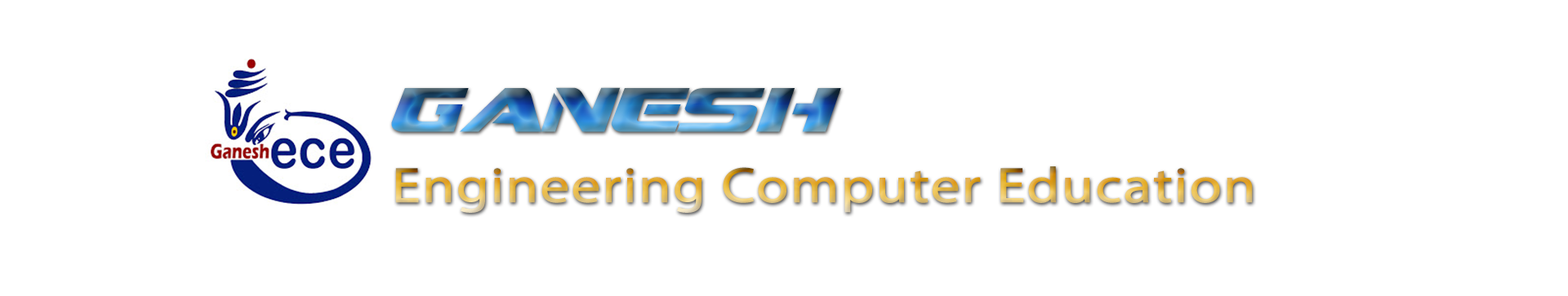
<style>
.page{position:relative;width:1568px;height:296px;background:#ffffff}
.page>*{position:absolute;margin:0}
.t1{font:50px "MyriadPro-Regular";font-weight:bold;scale:1.18 1}
.t2{font:62.5px "DreamMMA";scale:1.18 1}
</style>
<div class="page">
<p class="t1" style="left:391px;top:87px;width:862px;height:126px"><span class="t2">ganesh<br></span>Engineering Computer Education</p>
</div>
